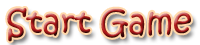
<style>
.page{position:relative;width:200px;height:45px;background:#ffffff}
.page>*{position:absolute;margin:0}
.t1{font:33px "KristenITC-Regular"}
</style>
<div class="page">
<p class="t1" style="left:7px;top:8px;width:184px;height:34px">Start Game</p>
</div>
